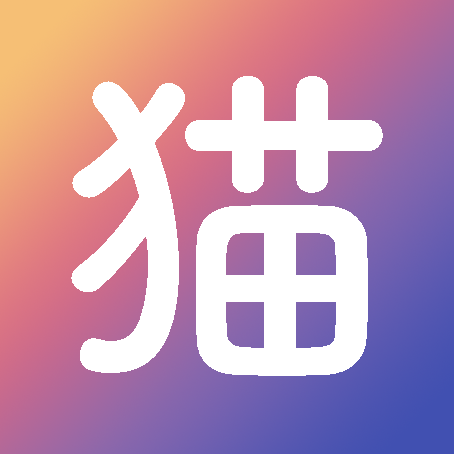
<style>
.page{position:relative;width:454px;height:454px;background:#ffffff}
.page>*{position:absolute;margin:0}
.t1{font:350px "TsukuARdGothicStd-B";color:#ffffff}
</style>
<div class="page">
<p class="t1" style="left:71px;top:76px;width:312px;height:300px">猫</p>
</div>
